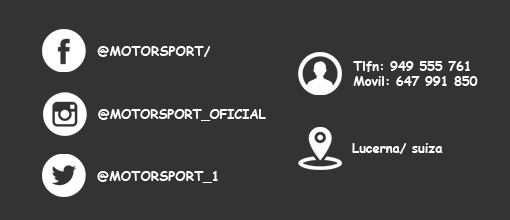
<style>
.page{position:relative;width:510px;height:220px;background:#333333}
.page>*{position:absolute;margin:0}
.t1{font:13px "ComicSansMS-Bold";color:#ffffff}
.t2{font:12.6px "ComicSansMS-Bold";color:#ffffff}
.t3{font:12.7px "ComicSansMS-Bold";color:#ffffff}
</style>
<div class="page">
<p class="t1" style="left:97px;top:46px;width:114px;height:11px">@MOTORSPORT/</p>
<p class="t1" style="left:353px;top:61px;width:125px;height:25px">Tlfn: 949 555 761<br>Movil: 647 991 850</p>
<p class="t2" style="left:98px;top:109px;width:168px;height:12px">@MOTORSPORT_OFICIAL</p>
<p class="t3" style="left:352px;top:143px;width:91px;height:11px">Lucerna/ suiza</p>
<p class="t1" style="left:97px;top:171px;width:121px;height:12px">@MOTORSPORT_1</p>
</div>
